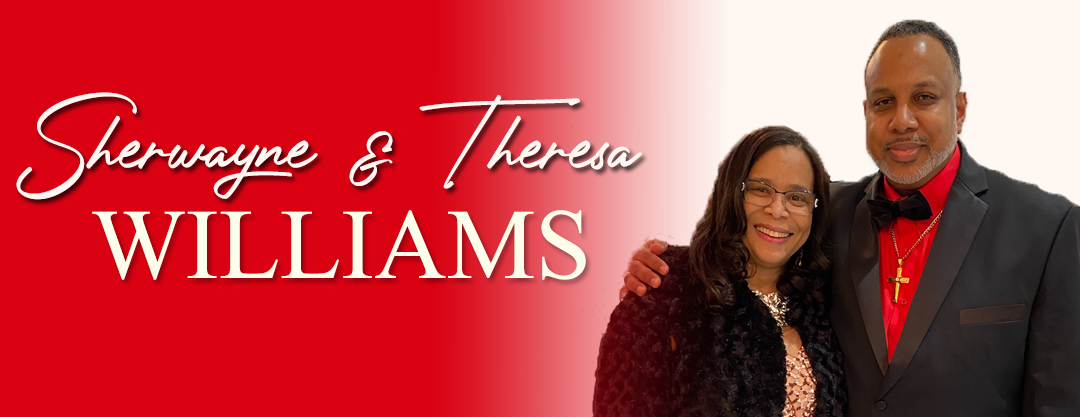
<style>
.page{position:relative;width:1080px;height:417px;background:#d90112}
.page>*{position:absolute;margin:0}
.t1{font:100px "PhotographSignature";color:#fef7f2}
.t2{font:100px "TimesNewRomanPSMT";color:#fcfdea}
</style>
<div class="page">
<p class="t1" style="left:16px;top:92px;width:626px;height:108px">Sherwayne &amp; Theresa</p>
<p class="t2" style="left:92px;top:210px;width:494px;height:70px">WILLIAMS</p>
</div>
